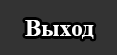
<style>
.page{position:relative;width:117px;height:55px;background:#333333}
.page>*{position:absolute;margin:0}
.t1{font:24px "TimesNewRomanPS-BoldMT";color:#ffffff}
</style>
<div class="page">
<p class="t1" style="left:25px;top:20px;width:69px;height:19px">Выход</p>
</div>
